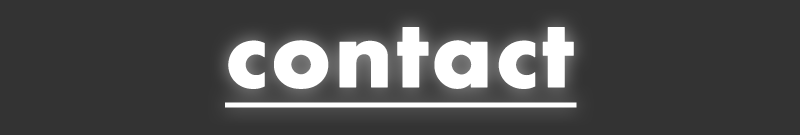
<style>
.page{position:relative;width:800px;height:135px;background:#333333}
.page>*{position:absolute;margin:0}
.t1{font:100px "FuturaPT-Bold";color:#ffffff;font-weight:bold;text-decoration:underline}
</style>
<div class="page">
<p class="t1" style="left:225px;top:27px;width:352px;height:81px">contact</p>
</div>
